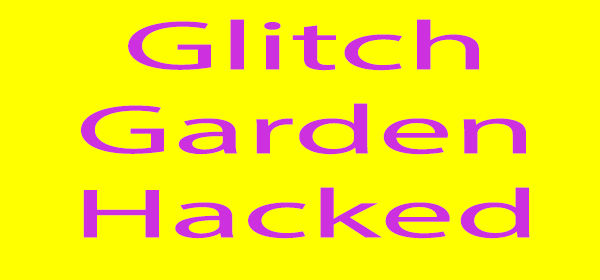
<style>
.page{position:relative;width:600px;height:280px;background:#ffff00}
.page>*{position:absolute;margin:0}
.t1{font:70px "MyriadPro-Regular";color:#cd30df;scale:2.14 1}
</style>
<div class="page">
<p class="t1" style="left:81px;top:19px;width:449px;height:220px;text-align:center">Glitch<br>Garden<br>Hacked</p>
</div>
